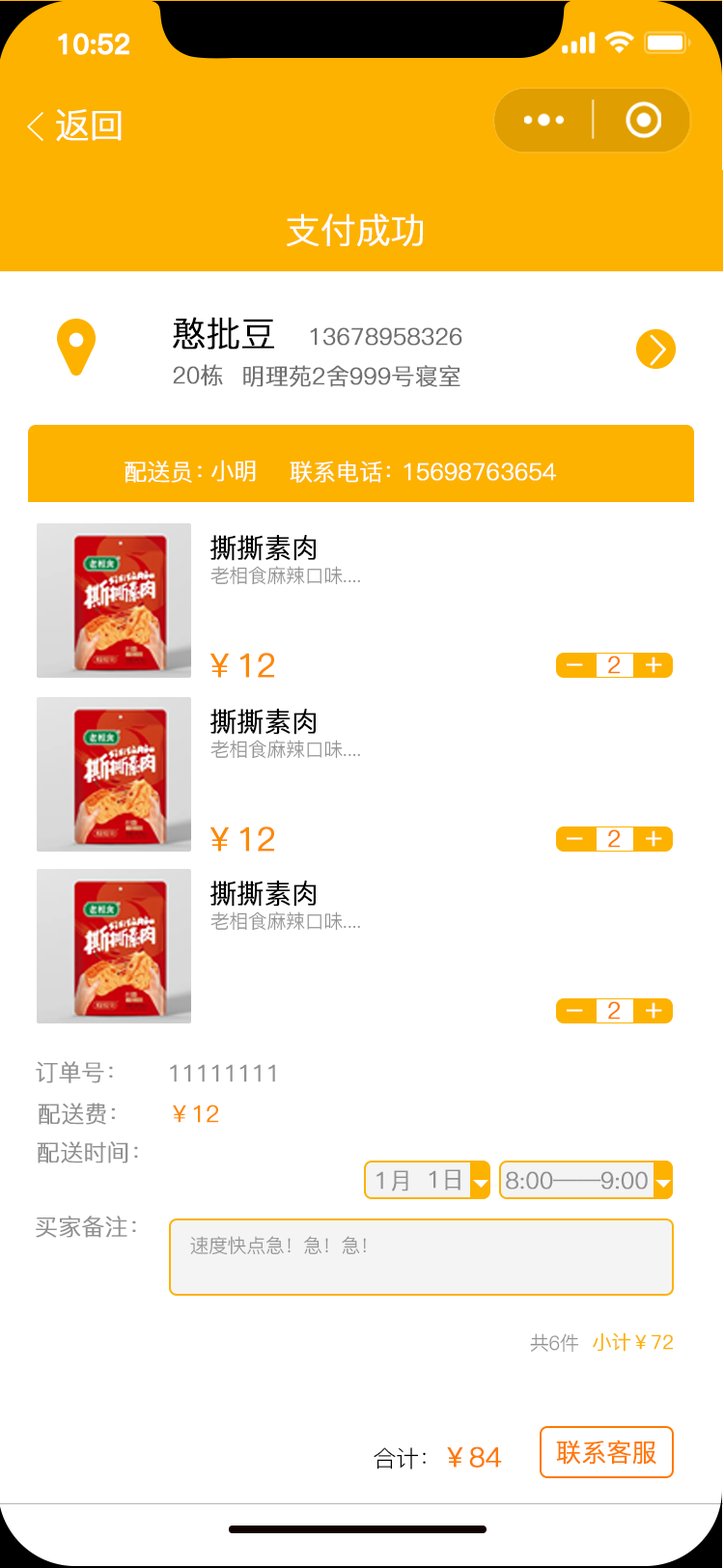
<style>
.page{position:relative;width:724px;height:1568px;background:#ffffff}
.page>*{position:absolute;margin:0}
.t1{font:27.5px "PingFang-SC-Bold";letter-spacing:-0.02em;color:#ffffff;font-weight:bold}
.t2{font:34.8px "PingFang-SC-Regular";letter-spacing:-0.02em;color:#ffffff;font-weight:bold}
.t3{font:34.8px "PingFang-SC-Regular";letter-spacing:-0.02em;color:#000000;font-weight:bold}
.t4{font:23.2px "PingFang-SC-Regular";letter-spacing:-0.02em;color:#707070;font-weight:bold}
.t5{font:23.2px "PingFang-SC-Regular";letter-spacing:-0.02em;color:#ffffff;font-weight:bold}
.t6{font:27px "PingFang-SC-Regular";letter-spacing:-0.02em;color:#000000;font-weight:bold}
.t7{font:19.3px "PingFang-SC-Regular";letter-spacing:-0.02em;color:#919191}
.t8{font:32.8px "PingFang-SC-Regular";letter-spacing:-0.02em;color:#fd8900;font-weight:bold}
.t9{font:29px "PingFang-SC-Regular";letter-spacing:-0.02em;color:#ffffff;font-weight:bold}
.t10{font:23.2px "PingFang-SC-Regular";letter-spacing:-0.02em;color:#ff7900;font-weight:bold}
.t11{font:23.2px "PingFang-SC-Regular";letter-spacing:-0.02em;color:#919191;font-weight:bold}
.t12{font:23.2px "PingFang-SC-Regular";letter-spacing:-0.02em;color:#fd8900;font-weight:bold}
.t13{font:19.3px "PingFang-SC-Regular";letter-spacing:-0.02em;color:#fdb200;font-weight:bold}
.t14{font:25.1px "PingFang-SC-Regular";letter-spacing:-0.02em;color:#ff7900;font-weight:bold}
.t15{font:23.2px "PingFang-SC-Regular";letter-spacing:-0.02em;color:#000000}
.t16{font:27px "PingFang-SC-Regular";letter-spacing:-0.02em;color:#ff7900;font-weight:bold}
</style>
<div class="page">
<p class="t1" style="left:58px;top:33px;width:71px;height:22px">10:52</p>
<p class="t2" style="left:56px;top:109px;width:66px;height:32px">返回</p>
<p class="t2" style="left:287px;top:213px;width:136px;height:33px">支付成功</p>
<p class="t3" style="left:173px;top:317px;width:101px;height:33px">憨批豆</p>
<p class="t4" style="left:310px;top:327px;width:152px;height:19px">13678958326</p>
<p class="t4" style="left:173px;top:364px;width:50px;height:22px">20栋</p>
<p class="t4" style="left:243px;top:365px;width:218px;height:22px">明理苑2舍999号寝室</p>
<p class="t5" style="left:125px;top:461px;width:77px;height:22px">配送员：</p>
<p class="t5" style="left:211px;top:460px;width:45px;height:22px">小明</p>
<p class="t5" style="left:290px;top:461px;width:100px;height:22px">联系电话：</p>
<p class="t5" style="left:404px;top:462px;width:152px;height:19px">15698763654</p>
<p class="t6" style="left:210px;top:535px;width:106px;height:26px">撕撕素肉</p>
<p class="t7" style="left:210px;top:566px;width:150px;height:19px">老相食麻辣口味....</p>
<p class="t8" style="left:210px;top:653px;width:64px;height:25px">￥12</p>
<p class="t9" style="left:567px;top:663px;width:16px;height:3px">-</p>
<p class="t10" style="left:608px;top:656px;width:12px;height:18px">2</p>
<p class="t9" style="left:646px;top:657px;width:16px;height:16px">+</p>
<p class="t6" style="left:210px;top:709px;width:106px;height:26px">撕撕素肉</p>
<p class="t7" style="left:210px;top:740px;width:150px;height:19px">老相食麻辣口味....</p>
<p class="t8" style="left:210px;top:826px;width:64px;height:26px">￥12</p>
<p class="t10" style="left:608px;top:829px;width:12px;height:19px">2</p>
<p class="t9" style="left:646px;top:830px;width:16px;height:17px">+</p>
<p class="t9" style="left:567px;top:837px;width:16px;height:3px">-</p>
<p class="t6" style="left:210px;top:881px;width:106px;height:26px">撕撕素肉</p>
<p class="t7" style="left:210px;top:911px;width:150px;height:20px">老相食麻辣口味....</p>
<p class="t10" style="left:608px;top:1001px;width:12px;height:19px">2</p>
<p class="t9" style="left:567px;top:1009px;width:16px;height:3px">-</p>
<p class="t9" style="left:646px;top:1002px;width:16px;height:17px">+</p>
<p class="t11" style="left:36px;top:1061px;width:77px;height:22px">订单号：</p>
<p class="t11" style="left:170px;top:1064px;width:105px;height:18px">11111111</p>
<p class="t11" style="left:38px;top:1103px;width:77px;height:22px">配送费：</p>
<p class="t12" style="left:173px;top:1105px;width:45px;height:18px">￥12</p>
<p class="t11" style="left:37px;top:1141px;width:101px;height:22px">配送时间：</p>
<p class="t11" style="left:429px;top:1169px;width:32px;height:21px">1日</p>
<p class="t11" style="left:377px;top:1170px;width:31px;height:21px">1月</p>
<p class="t11" style="left:506px;top:1171px;width:142px;height:19px">8:00——9:00</p>
<p class="t11" style="left:36px;top:1216px;width:100px;height:22px">买家备注：</p>
<p class="t7" style="left:190px;top:1236px;width:176px;height:19px">速度快点急！急！急！</p>
<p class="t7" style="left:530px;top:1333px;width:49px;height:20px">共6件</p>
<p class="t13" style="left:593px;top:1332px;width:81px;height:20px">小计￥72</p>
<p class="t14" style="left:556px;top:1440px;width:101px;height:25px">联系客服</p>
<p class="t15" style="left:374px;top:1446px;width:128px;height:24px">合计：<span class="t16">￥84</span></p>
</div>
